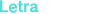
<style>
.page{position:relative;width:100px;height:14px;background:#ffffff}
.page>*{position:absolute;margin:0}
.t1{font:14.8px "RodinProN-DB";color:#59dbdd;font-weight:bold}
</style>
<div class="page">
<p class="t1" style="left:0px;top:0px;width:39px;height:13px">Letra</p>
</div>
